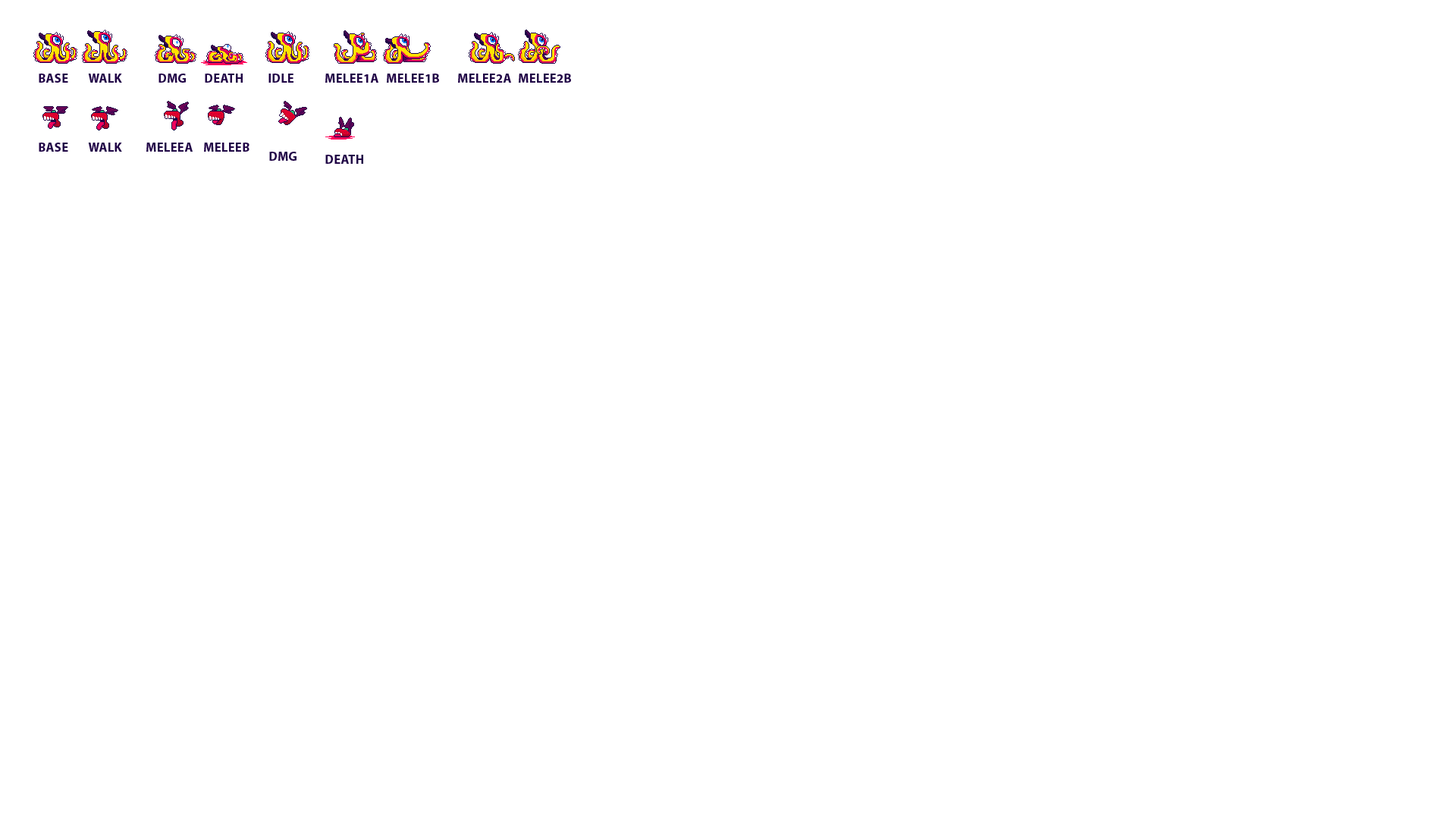
<style>
.page{position:relative;width:1456px;height:819px;background:#ffffff}
.page>*{position:absolute;margin:0}
.t1{font:12.6px "MyriadPro-Bold";color:#200446;text-transform:uppercase}
</style>
<div class="page">
<p class="t1" style="left:39px;top:74px;width:29px;height:9px">BASE</p>
<p class="t1" style="left:88px;top:74px;width:34px;height:9px">Walk</p>
<p class="t1" style="left:158px;top:74px;width:28px;height:9px">dmg</p>
<p class="t1" style="left:205px;top:74px;width:38px;height:9px">death</p>
<p class="t1" style="left:268px;top:74px;width:25px;height:9px">idle</p>
<p class="t1" style="left:325px;top:74px;width:53px;height:9px">melee1a</p>
<p class="t1" style="left:387px;top:74px;width:52px;height:9px">melee1B</p>
<p class="t1" style="left:458px;top:74px;width:53px;height:9px">melee2A</p>
<p class="t1" style="left:519px;top:74px;width:52px;height:9px">melee2B</p>
<p class="t1" style="left:39px;top:143px;width:29px;height:9px">base</p>
<p class="t1" style="left:88px;top:143px;width:34px;height:9px">walk</p>
<p class="t1" style="left:146px;top:143px;width:47px;height:9px">meleea</p>
<p class="t1" style="left:204px;top:143px;width:45px;height:9px">meleeB</p>
<p class="t1" style="left:269px;top:152px;width:28px;height:9px">dmg</p>
<p class="t1" style="left:325px;top:155px;width:38px;height:9px">death</p>
</div>
